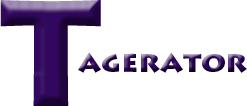
<style>
.page{position:relative;width:247px;height:106px;background:#ffffff}
.page>*{position:absolute;margin:0}
.t1{font:30px "LithosPro-Black"}
</style>
<div class="page">
<p class="t1" style="left:78px;top:52px;width:169px;height:21px">agerator</p>
</div>
